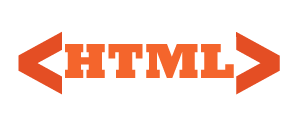
<style>
.page{position:relative;width:291px;height:123px;background:#ffffff}
.page>*{position:absolute;margin:0}
.t1{font:100px "ErasITC-Bold";color:#e44e24}
.t2{font:50px "Rockwell-ExtraBold";color:#f4652c}
</style>
<div class="page">
<p class="t1" style="left:18px;top:31px;width:44px;height:64px">&lt;</p>
<p class="t1" style="left:236px;top:32px;width:44px;height:63px">&gt;</p>
<p class="t2" style="left:65px;top:44px;width:169px;height:34px">HTML</p>
</div>
